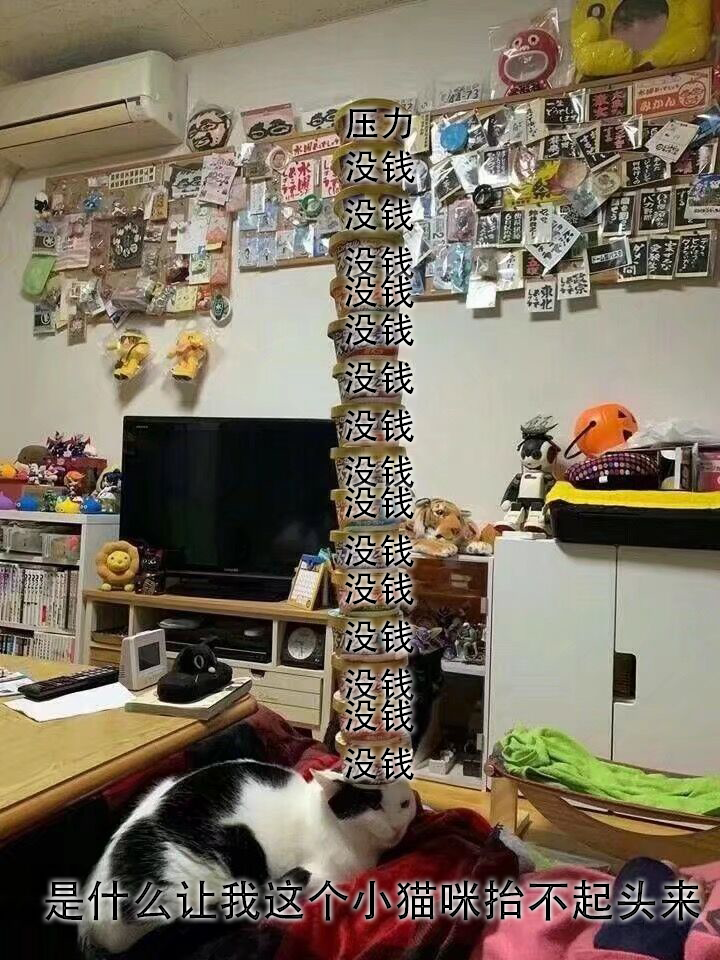
<style>
.page{position:relative;width:720px;height:960px}
.page>*{position:absolute;margin:0}
.t1{font:36px "AdobeHeitiStd-Regular";color:#000000}
.t2{font:44px "AdobeHeitiStd-Regular";color:#000000}
</style>
<div class="page">
<p class="t1" style="left:345px;top:106px;width:67px;height:33px">压力</p>
<p class="t1" style="left:346px;top:150px;width:69px;height:34px">没钱</p>
<p class="t1" style="left:345px;top:198px;width:69px;height:34px">没钱</p>
<p class="t1" style="left:345px;top:246px;width:69px;height:34px">没钱</p>
<p class="t1" style="left:345px;top:275px;width:69px;height:34px">没钱</p>
<p class="t1" style="left:345px;top:313px;width:69px;height:34px">没钱</p>
<p class="t1" style="left:345px;top:361px;width:69px;height:34px">没钱</p>
<p class="t1" style="left:345px;top:409px;width:69px;height:34px">没钱</p>
<p class="t1" style="left:345px;top:455px;width:69px;height:34px">没钱</p>
<p class="t1" style="left:345px;top:486px;width:69px;height:34px">没钱</p>
<p class="t1" style="left:345px;top:534px;width:69px;height:34px">没钱</p>
<p class="t1" style="left:345px;top:572px;width:69px;height:34px">没钱</p>
<p class="t1" style="left:345px;top:620px;width:69px;height:34px">没钱</p>
<p class="t1" style="left:345px;top:668px;width:69px;height:34px">没钱</p>
<p class="t1" style="left:345px;top:699px;width:69px;height:34px">没钱</p>
<p class="t1" style="left:345px;top:747px;width:69px;height:34px">没钱</p>
<p class="t2" style="left:44px;top:879px;width:656px;height:42px">是什么让我这个小猫咪抬不起头来</p>
</div>
